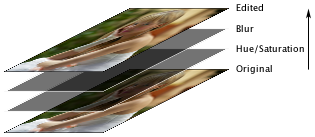
<style>
.page{position:relative;width:315px;height:137px;background:#ffffff}
.page>*{position:absolute;margin:0}
.t1{font:9px "LucidaGrande";color:#000000}
.t2{font:9px "LucidaGrande"}
</style>
<div class="page">
<p class="t1" style="left:236px;top:4px;width:27px;height:7px">Edited</p>
<p class="t2" style="left:236px;top:25px;width:18px;height:7px">Blur</p>
<p class="t1" style="left:236px;top:45px;width:68px;height:9px">Hue/Saturation</p>
<p class="t2" style="left:236px;top:65px;width:36px;height:9px">Original</p>
</div>
